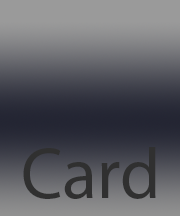
<style>
.page{position:relative;width:180px;height:216px}
.page>*{position:absolute;margin:0}
.t1{font:72px "MyriadPro-Regular";color:#303030}
</style>
<div class="page">
<p class="t1" style="left:23px;top:147px;width:133px;height:52px">Card</p>
</div>
